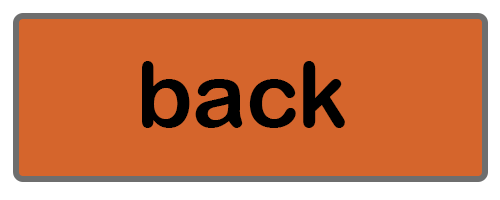
<style>
.page{position:relative;width:500px;height:200px;background:#d5652c}
.page>*{position:absolute;margin:0}
.t1{font:90.5px "ArialRoundedMTBold";color:#000000}
</style>
<div class="page">
<p class="t1" style="left:142px;top:61px;width:203px;height:67px">back</p>
</div>
